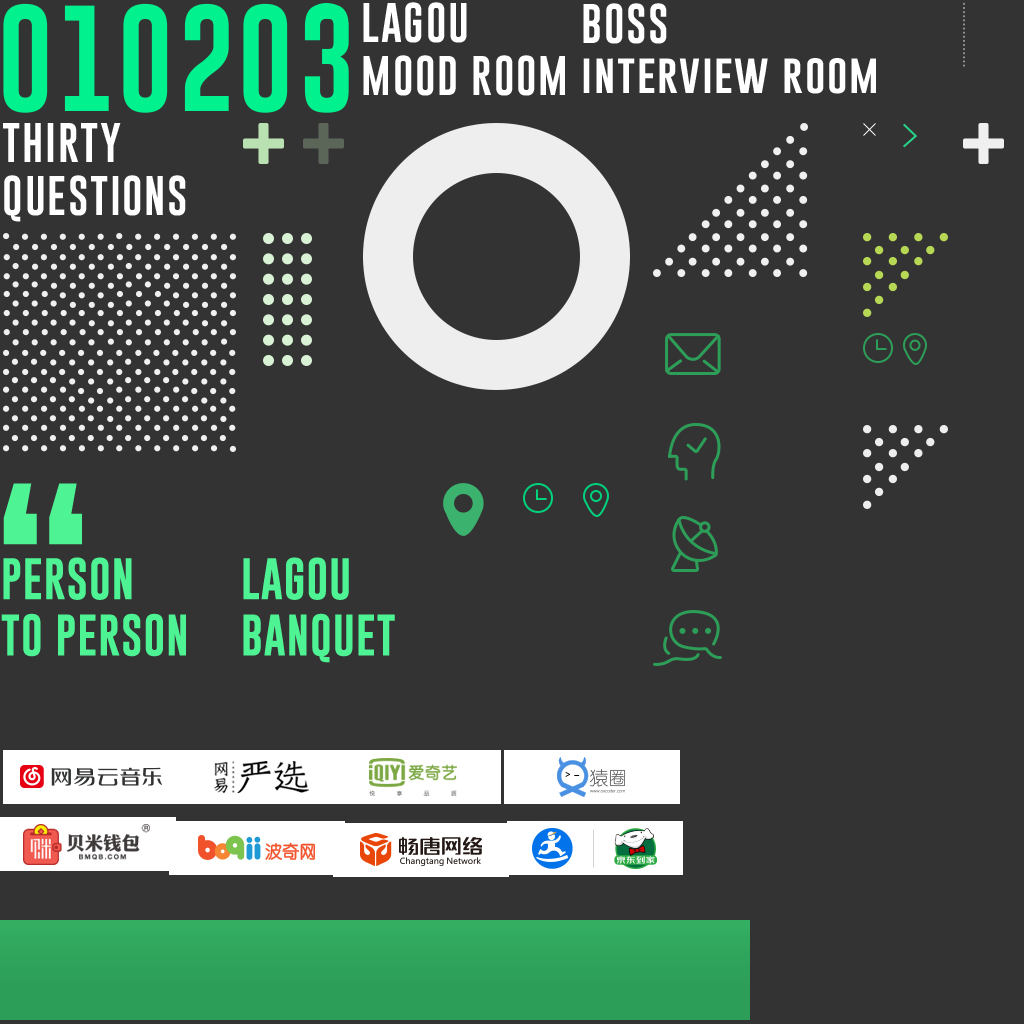
<style>
.page{position:relative;width:1024px;height:1024px;background:#333333}
.page>*{position:absolute;margin:0}
.t1{font:110.4px "Gobold";letter-spacing:0.04em;color:#00f18e}
.t2{font:40.8px "Gobold";letter-spacing:0.04em;color:#ffffff}
.t3{font:189.7px "Gobold";color:#4ef394;font-weight:bold}
.t4{font:42.6px/56.3px "Gobold";color:#4ef394;font-weight:bold}
</style>
<div class="page">
<p class="t1" style="left:3px;top:3px;width:106px;height:110px">01</p>
<p class="t1" style="left:123px;top:3px;width:106px;height:110px">02</p>
<p class="t1" style="left:243px;top:3px;width:106px;height:110px">03</p>
<p class="t2" style="left:363px;top:2px;width:104px;height:41px">LAGOU</p>
<p class="t2" style="left:583px;top:3px;width:84px;height:41px">BOSS</p>
<p class="t2" style="left:363px;top:55px;width:202px;height:41px">MOOD ROOM</p>
<p class="t2" style="left:583px;top:58px;width:293px;height:36px">interview room</p>
<p class="t2" style="left:3px;top:123px;width:118px;height:39px">THIRTY</p>
<p class="t2" style="left:4px;top:175px;width:182px;height:47px">QUESTIONS</p>
<p class="t3" style="left:3px;top:483px;width:79px;height:62px">“</p>
<p class="t4" style="left:1px;top:557px;width:185px;height:100px">PERSON  <br>TO PERSON</p>
<p class="t4" style="left:243px;top:557px;width:152px;height:106px">LAGOU  <br>BANQUET</p>
</div>
